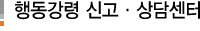
<style>
.page{position:relative;width:200px;height:31px;background:#ffffff}
.page>*{position:absolute;margin:0}
.t1{font:20px "YDIYGO330";letter-spacing:-0.01em;color:#000000;scale:0.9 1}
</style>
<div class="page">
<p class="t1" style="left:15px;top:1px;width:185px;height:19px">행동강령 신고·상담센터</p>
</div>
